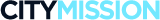
<style>
.page{position:relative;width:160px;height:20px;background:#ffffff}
.page>*{position:absolute;margin:0}
.t1{font:26.9px "Gotham-Bold";letter-spacing:-0.08em;color:#72e8ff}
.t2{font:26.9px "Gotham-Bold";letter-spacing:-0.08em;color:#071222}
</style>
<div class="page">
<p class="t1" style="left:0px;top:0px;width:160px;height:20px"><span class="t2">CITY</span>MISSION</p>
</div>
